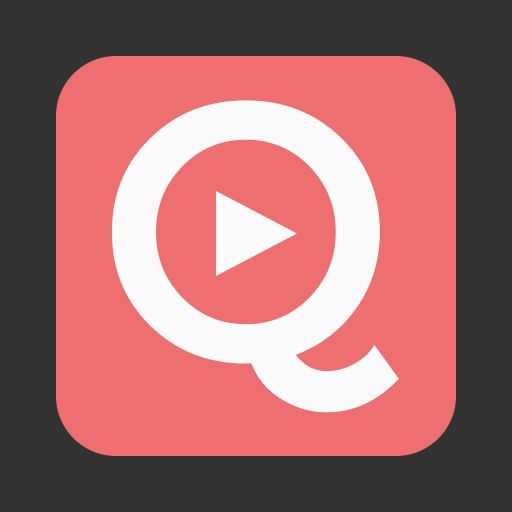
<style>
.page{position:relative;width:512px;height:512px;background:#ed6f70}
.page>*{position:absolute;margin:0}
.t1{font:364.3px "Montserrat-Regular";color:#fafafa}
</style>
<div class="page">
<p class="t1" style="left:111px;top:100px;width:288px;height:313px">Q</p>
</div>
